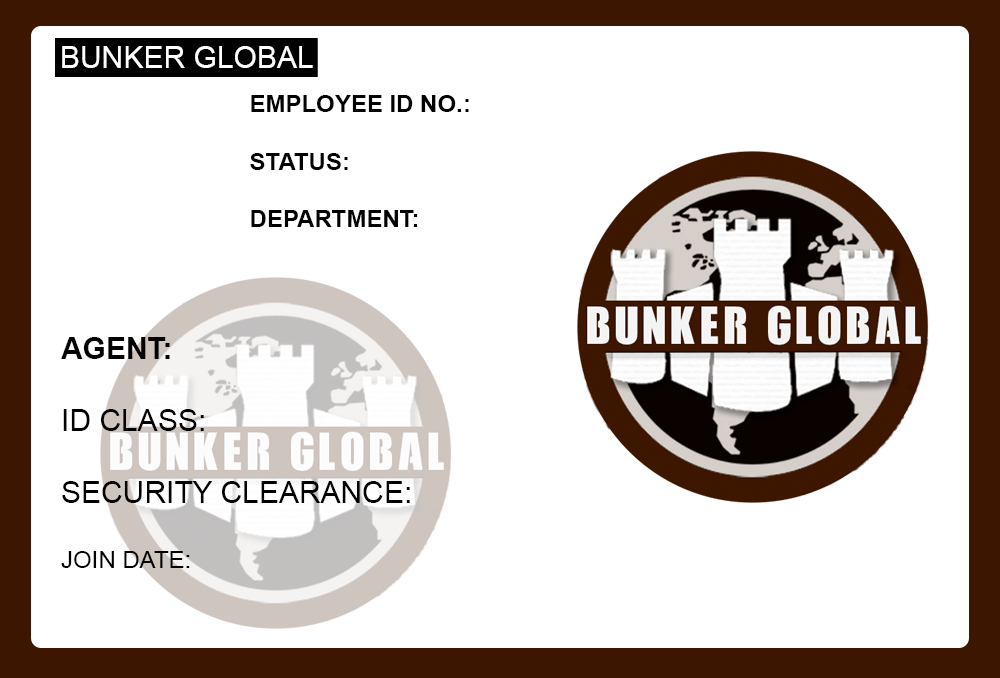
<style>
.page{position:relative;width:1000px;height:678px;background:#ffffff}
.page>*{position:absolute;margin:0}
.t1{font:30px "ArialMT";color:#ffffff}
.t2{font:24px "Arial-BoldMT";color:#000000}
.t3{font:30px "ArialMT";color:#000000}
.t4{font:30px "Arial-BoldMT";color:#000000}
.t5{font:24px "ArialMT";color:#000000}
</style>
<div class="page">
<p class="t1" style="left:62px;top:46px;width:251px;height:22px">BUNKER GLOBAL</p>
<p class="t2" style="left:250px;top:95px;width:219px;height:132px">EMPLOYEE ID NO.:<br><br>STATUS:<br><br>DEPARTMENT:</p>
<p class="t3" style="left:61px;top:337px;width:349px;height:231px"><span class="t4">AGENT:<br></span><br>ID CLASS:<br><br>SECURITY CLEARANCE:<br><br><span class="t5">JOIN DATE:</span></p>
</div>
